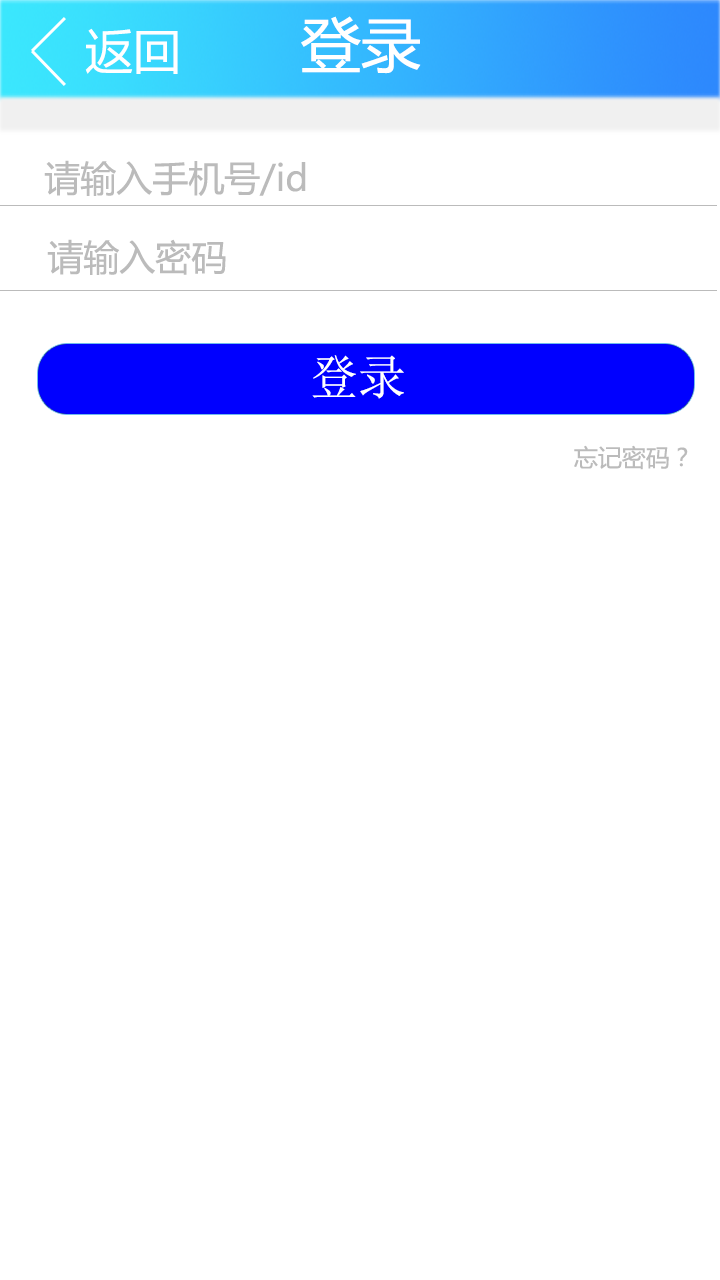
<style>
.page{position:relative;width:720px;height:1280px;background:#ffffff}
.page>*{position:absolute;margin:0}
.t1{font:60px "MicrosoftYaHei";color:#ffffff}
.t2{font:48px "MicrosoftYaHei";color:#ffffff}
.t3{font:36px "MicrosoftYaHei";color:#bbbbbb}
.t4{font:48px "NSimSun";color:#ffffff}
.t5{font:24px "MicrosoftYaHei";color:#bbbbbb}
</style>
<div class="page">
<p class="t1" style="left:301px;top:16px;width:120px;height:58px">登录</p>
<p class="t2" style="left:85px;top:28px;width:93px;height:46px">返回</p>
<p class="t3" style="left:44px;top:160px;width:262px;height:36px">请输入手机号/id</p>
<p class="t3" style="left:47px;top:239px;width:179px;height:36px">请输入密码</p>
<p class="t4" style="left:312px;top:355px;width:92px;height:44px">登录</p>
<p class="t5" style="left:574px;top:445px;width:114px;height:25px">忘记密码？</p>
</div>
